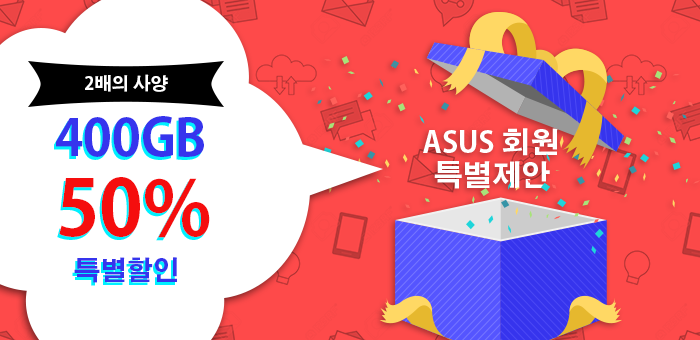
<style>
.page{position:relative;width:700px;height:340px;background:#ffffff}
.page>*{position:absolute;margin:0}
.t1{font:17.6px "AdobeGothicStd-Bold";color:#ffffff}
.t2{font:50.2px "AdobeGothicStd-Bold";color:#3634ed}
.t3{font:76.2px "AdobeGothicStd-Bold";color:#f50e0e}
.t4{font:26.3px "AdobeGothicStd-Bold";color:#3634ed}
</style>
<div class="page">
<p class="t1" style="left:85px;top:74px;width:83px;height:18px">2배의 사양</p>
<p class="t2" style="left:56px;top:116px;width:148px;height:41px">400GB</p>
<p class="t3" style="left:59px;top:177px;width:151px;height:61px">50%</p>
<p class="t4" style="left:74px;top:257px;width:103px;height:26px">특별할인</p>
</div>
